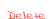
<style>
.page{position:relative;width:56px;height:19px;background:#ffffff}
.page>*{position:absolute;margin:0}
.t1{font:10px "BobbiesHand";color:#fa2a2a}
</style>
<div class="page">
<p class="t1" style="left:7px;top:11px;width:38px;height:9px">Delete</p>
</div>
